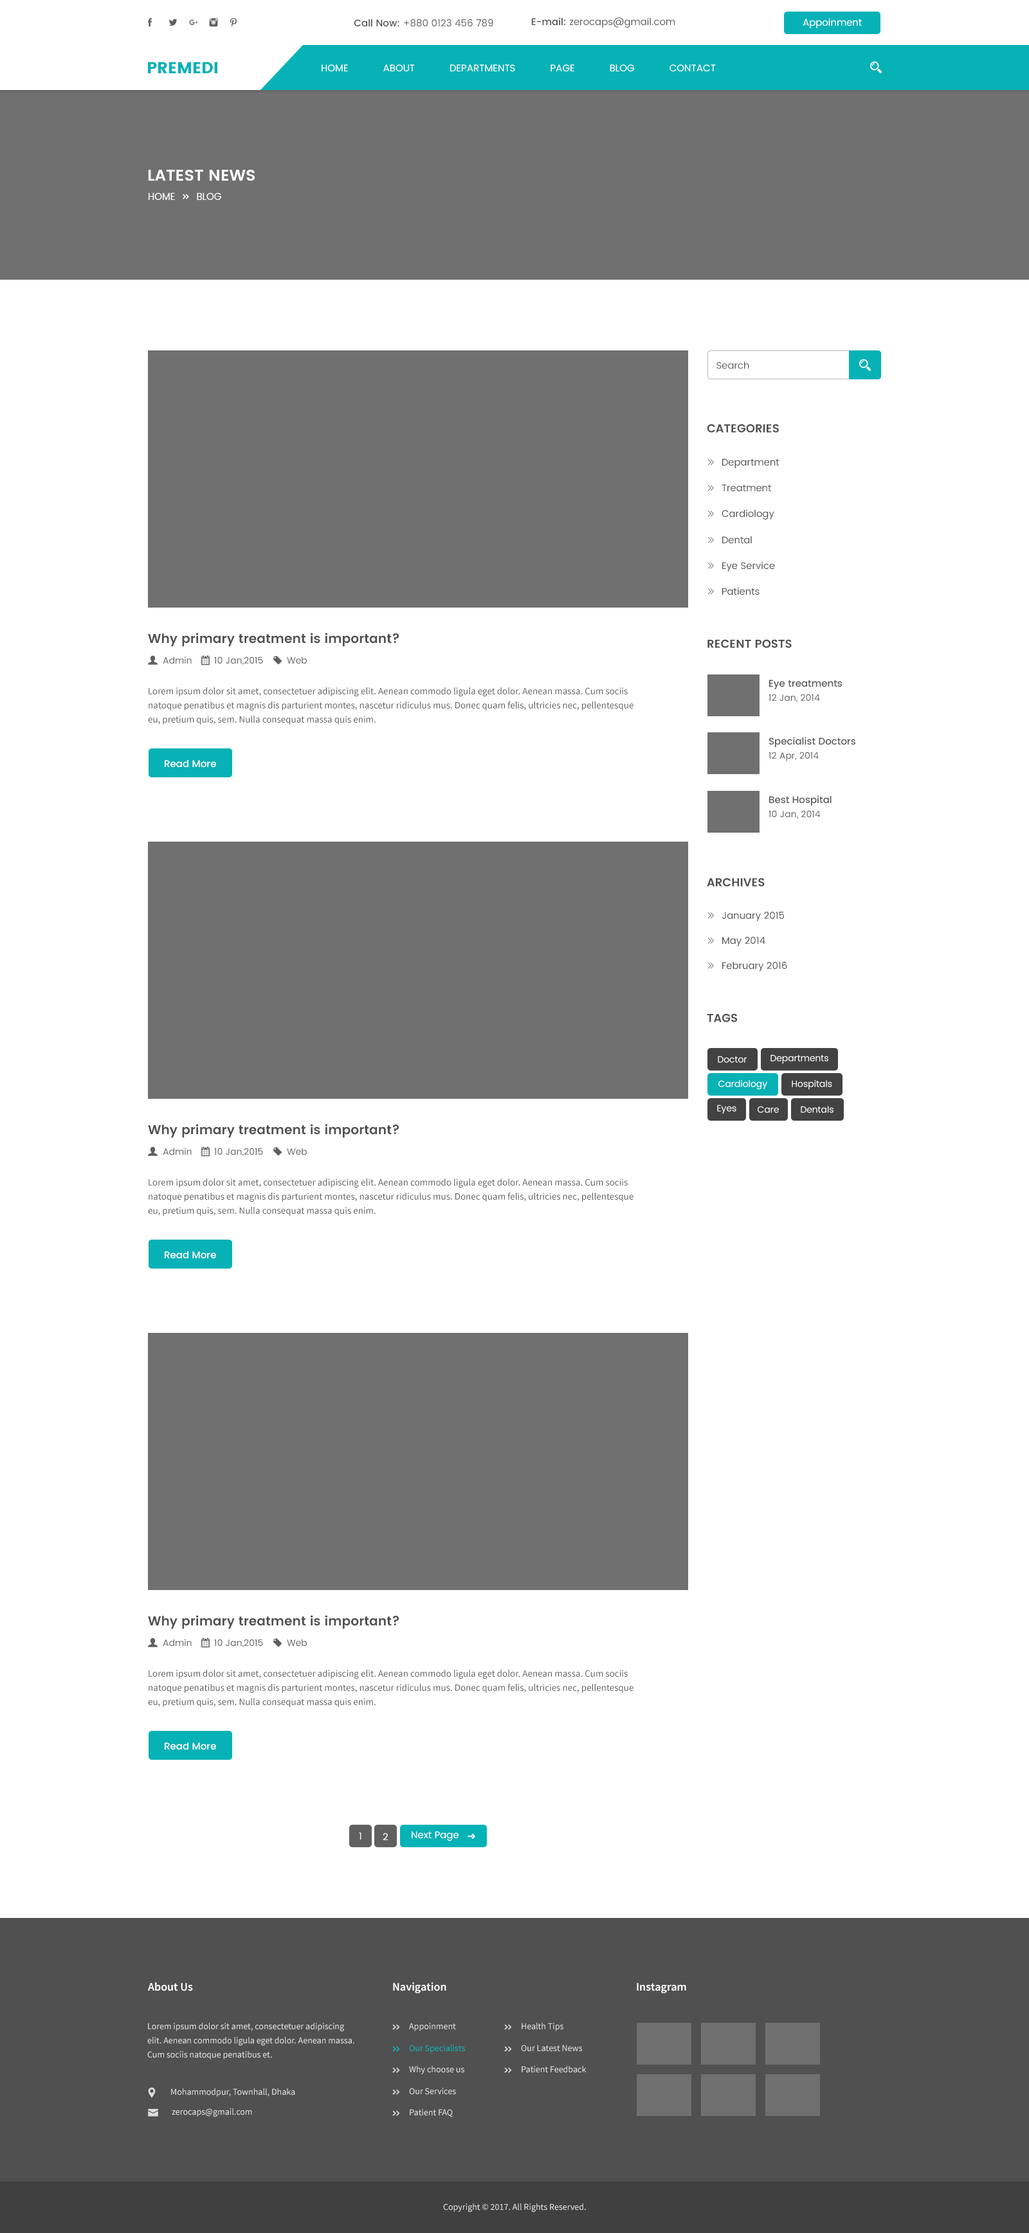
<style>
.page{position:relative;width:1029px;height:2233px;background:#ffffff}
.page>*{position:absolute;margin:0}
.t1{font:9.6px "Poppins-Regular";color:#606060}
.t2{font:9.6px "Poppins-Medium";color:#505050}
.t3{font:9.6px "Poppins-Regular";color:#fffefe}
.t4{font:16.1px "Poppins";color:#06b2b6}
.t5{font:9.6px "Poppins-Regular";color:#ffffff}
.t6{font:16.1px "Poppins-SemiBold";color:#ffffff}
.t7{font:11.6px "Poppins-SemiBold";color:#505050;text-transform:uppercase}
.t8{font:12.9px "Poppins-SemiBold";color:#505050}
.t9{font:9px "Poppins-Regular";color:#606060}
.t10{font:9.6px/14.1px "SourceSansPro-Regular";color:#606060}
.t11{font:9.6px "Poppins-Medium";color:#555555}
.t12{font:9.6px "Poppins-Medium";color:#ffffff}
.t13{font:9px "Poppins-Regular";color:#fffefe}
.t14{font:11.6px "SourceSansPro-Semibold";color:#ffffff}
.t15{font:9px/14.1px "SourceSansPro-Regular";color:#dddddd}
.t16{font:9px "SourceSansPro-Regular";color:#dddddd}
.t17{font:9px "SourceSansPro-Regular";color:#06b2b6}
</style>
<div class="page">
<p class="t1" style="left:531px;top:17px;width:144px;height:11px"><span class="t2">E-mail: </span>zerocaps@gmail.com</p>
<p class="t1" style="left:354px;top:19px;width:139px;height:8px"><span class="t2">Call Now: </span>+880 0123 456 789</p>
<p class="t3" style="left:802px;top:18px;width:59px;height:10px">Appoinment</p>
<p class="t4" style="left:148px;top:62px;width:69px;height:11px">PREMEDI</p>
<p class="t5" style="left:321px;top:64px;width:395px;height:7px">HOME            ABOUT            DEPARTMENTS            PAGE            BLOG            CONTACT</p>
<p class="t6" style="left:148px;top:170px;width:107px;height:11px">LATEST NEWS</p>
<p class="t1" style="left:716px;top:361px;width:33px;height:8px">Search</p>
<p class="t7" style="left:706px;top:424px;width:73px;height:9px">categories</p>
<p class="t8" style="left:148px;top:633px;width:251px;height:14px">Why primary treatment is important?</p>
<p class="t7" style="left:707px;top:639px;width:84px;height:9px">recent posts</p>
<p class="t9" style="left:163px;top:656px;width:29px;height:8px">Admin</p>
<p class="t9" style="left:214px;top:656px;width:49px;height:9px">10 Jan,2015</p>
<p class="t9" style="left:287px;top:656px;width:20px;height:8px">Web</p>
<p class="t10" style="left:148px;top:687px;width:485px;height:37px;text-align:right">Lorem ipsum dolor sit amet, consectetuer adipiscing elit. Aenean commodo ligula eget dolor. Aenean massa. Cum sociis natoque penatibus et magnis dis parturient montes, nascetur ridiculus mus. Donec quam felis, ultricies nec, pellentesque eu, pretium quis, sem. Nulla consequat massa quis enim.</p>
<p class="t11" style="left:769px;top:680px;width:73px;height:9px">Eye treatments</p>
<p class="t9" style="left:768px;top:694px;width:52px;height:8px">12 Jan, 2014</p>
<p class="t11" style="left:769px;top:737px;width:86px;height:10px">Specialist Doctors</p>
<p class="t12" style="left:165px;top:760px;width:51px;height:8px">Read More</p>
<p class="t9" style="left:768px;top:752px;width:50px;height:9px">12 Apr, 2014</p>
<p class="t11" style="left:769px;top:795px;width:62px;height:11px">Best Hospital</p>
<p class="t9" style="left:768px;top:810px;width:52px;height:8px">10 Jan, 2014</p>
<p class="t7" style="left:706px;top:878px;width:58px;height:9px">ARCHIVES</p>
<p class="t7" style="left:706px;top:1013px;width:31px;height:9px">tags</p>
<p class="t13" style="left:717px;top:1056px;width:29px;height:7px">Doctor</p>
<p class="t13" style="left:770px;top:1054px;width:58px;height:10px">Departments</p>
<p class="t13" style="left:718px;top:1079px;width:49px;height:11px">Cardiology</p>
<p class="t13" style="left:791px;top:1079px;width:41px;height:11px">Hospitals</p>
<p class="t13" style="left:717px;top:1104px;width:19px;height:9px">Eyes</p>
<p class="t13" style="left:757px;top:1106px;width:22px;height:7px">Care</p>
<p class="t13" style="left:800px;top:1106px;width:33px;height:7px">Dentals</p>
<p class="t8" style="left:148px;top:1124px;width:251px;height:14px">Why primary treatment is important?</p>
<p class="t9" style="left:163px;top:1148px;width:29px;height:7px">Admin</p>
<p class="t9" style="left:214px;top:1148px;width:49px;height:8px">10 Jan,2015</p>
<p class="t9" style="left:287px;top:1148px;width:20px;height:7px">Web</p>
<p class="t10" style="left:148px;top:1178px;width:485px;height:38px;text-align:right">Lorem ipsum dolor sit amet, consectetuer adipiscing elit. Aenean commodo ligula eget dolor. Aenean massa. Cum sociis natoque penatibus et magnis dis parturient montes, nascetur ridiculus mus. Donec quam felis, ultricies nec, pellentesque eu, pretium quis, sem. Nulla consequat massa quis enim.</p>
<p class="t12" style="left:165px;top:1251px;width:51px;height:8px">Read More</p>
<p class="t8" style="left:148px;top:1615px;width:251px;height:14px">Why primary treatment is important?</p>
<p class="t9" style="left:163px;top:1639px;width:29px;height:7px">Admin</p>
<p class="t9" style="left:214px;top:1639px;width:49px;height:8px">10 Jan,2015</p>
<p class="t9" style="left:287px;top:1639px;width:20px;height:7px">Web</p>
<p class="t10" style="left:148px;top:1670px;width:485px;height:37px;text-align:right">Lorem ipsum dolor sit amet, consectetuer adipiscing elit. Aenean commodo ligula eget dolor. Aenean massa. Cum sociis natoque penatibus et magnis dis parturient montes, nascetur ridiculus mus. Donec quam felis, ultricies nec, pellentesque eu, pretium quis, sem. Nulla consequat massa quis enim.</p>
<p class="t12" style="left:165px;top:1742px;width:51px;height:8px">Read More</p>
<p class="t5" style="left:359px;top:1832px;width:2px;height:7px">1</p>
<p class="t5" style="left:382px;top:1833px;width:6px;height:7px">2</p>
<p class="t5" style="left:411px;top:1831px;width:47px;height:10px">Next Page</p>
<p class="t14" style="left:148px;top:1982px;width:45px;height:9px">About Us</p>
<p class="t14" style="left:393px;top:1982px;width:53px;height:11px">Navigation</p>
<p class="t14" style="left:636px;top:1983px;width:50px;height:10px">Instagram</p>
<p class="t15" style="left:147px;top:2022px;width:207px;height:37px">Lorem ipsum dolor sit amet, consectetuer adipiscing elit. Aenean commodo ligula eget dolor. Aenean massa. Cum sociis natoque penatibus et.</p>
<p class="t16" style="left:409px;top:2022px;width:47px;height:9px">Appoinment</p>
<p class="t16" style="left:521px;top:2022px;width:42px;height:9px">Health Tips</p>
<p class="t17" style="left:409px;top:2044px;width:56px;height:9px">Our Specialists</p>
<p class="t16" style="left:521px;top:2044px;width:61px;height:7px">Our Latest News</p>
<p class="t16" style="left:409px;top:2066px;width:55px;height:8px">Why choose us</p>
<p class="t16" style="left:521px;top:2066px;width:65px;height:7px">Patient Feedback</p>
<p class="t16" style="left:171px;top:2088px;width:124px;height:8px">Mohammodpur, Townhall, Dhaka</p>
<p class="t16" style="left:409px;top:2087px;width:47px;height:7px">Our Services</p>
<p class="t16" style="left:172px;top:2108px;width:80px;height:9px">zerocaps@gmail.com</p>
<p class="t16" style="left:410px;top:2109px;width:43px;height:8px">Patient FAQ</p>
<p class="t16" style="left:443px;top:2203px;width:143px;height:9px">Copyright © 2017. All Rights Reserved.</p>
</div>
